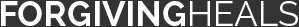
<style>
.page{position:relative;width:299px;height:27px;background:#333333}
.page>*{position:absolute;margin:0}
.t1{font:35px "Raleway-Bold";color:#ffffff}
.t2{font:35px "Raleway-Regular";color:#ffffff}
</style>
<div class="page">
<p class="t1" style="left:1px;top:1px;width:297px;height:25px">FORGIVING<span class="t2">HEALS</span></p>
</div>
